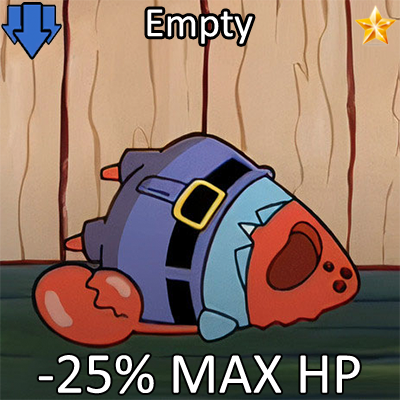
<style>
.page{position:relative;width:400px;height:400px}
.page>*{position:absolute;margin:0}
.t1{font:72px "Calibri";color:#ffffff}
.t2{font:100px "Calibri";color:#ffffff}
</style>
<div class="page">
<p class="t1" style="left:147px;top:9px;width:106px;height:35px">Empty</p>
<p class="t2" style="left:38px;top:354px;width:322px;height:40px">-25% MAX HP</p>
</div>
